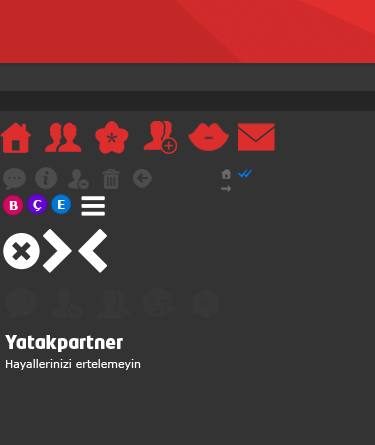
<style>
.page{position:relative;width:375px;height:445px;background:#333333}
.page>*{position:absolute;margin:0}
.t1{font:11.7px "Verdana-Bold";color:#ffffff}
.t2{font:18px "NeoTechStd-Black";color:#ffffff}
.t3{font:11px "Verdana";color:#ffffff}
</style>
<div class="page">
<p class="t1" style="left:9px;top:201px;width:9px;height:9px">B</p>
<p class="t1" style="left:33px;top:200px;width:9px;height:11px">Ç</p>
<p class="t1" style="left:58px;top:200px;width:7px;height:9px">E</p>
<p class="t2" style="left:5px;top:335px;width:118px;height:17px">Yatakpartner</p>
<p class="t3" style="left:6px;top:359px;width:135px;height:11px">Hayallerinizi ertelemeyin</p>
</div>
